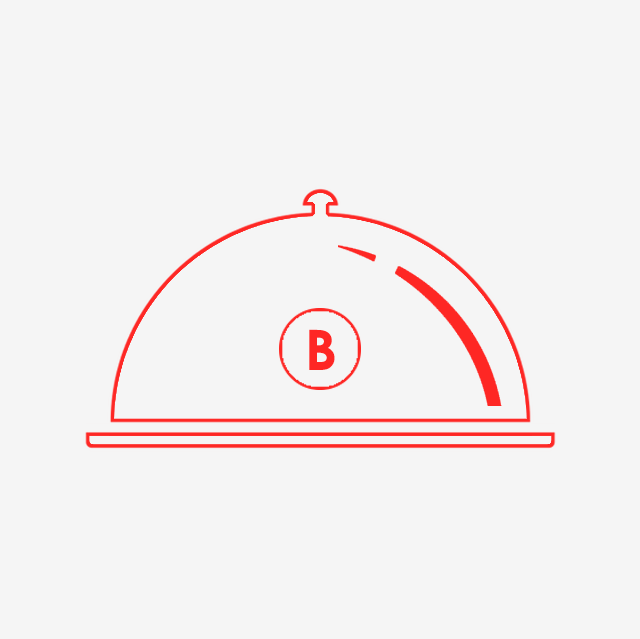
<style>
.page{position:relative;width:640px;height:639px;background:#f5f5f5}
.page>*{position:absolute;margin:0}
.t1{font:55px "CenturyGothic-Bold";letter-spacing:0.02em;color:#fe2724;text-transform:uppercase;font-weight:bold}
</style>
<div class="page">
<p class="t1" style="left:309px;top:329px;width:26px;height:41px">B</p>
</div>
